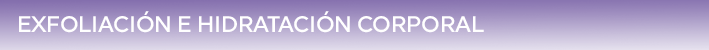
<style>
.page{position:relative;width:709px;height:50px}
.page>*{position:absolute;margin:0}
.t1{font:22.5px "Uniform-Medium";letter-spacing:-0.01em;color:#ffffff;text-transform:uppercase}
</style>
<div class="page">
<p class="t1" style="left:19px;top:11px;width:465px;height:22px">Exfoliación e Hidratación Corporal</p>
</div>
